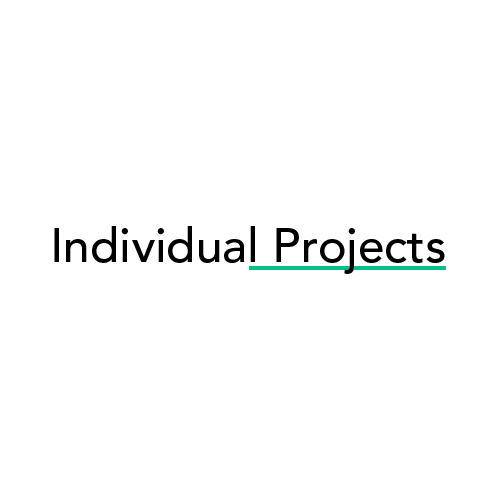
<style>
.page{position:relative;width:500px;height:500px;background:#ffffff}
.page>*{position:absolute;margin:0}
.t1{font:48px "AvenirLTStd-Medium";color:#000000}
</style>
<div class="page">
<p class="t1" style="left:54px;top:226px;width:391px;height:48px">Individual Projects</p>
</div>
